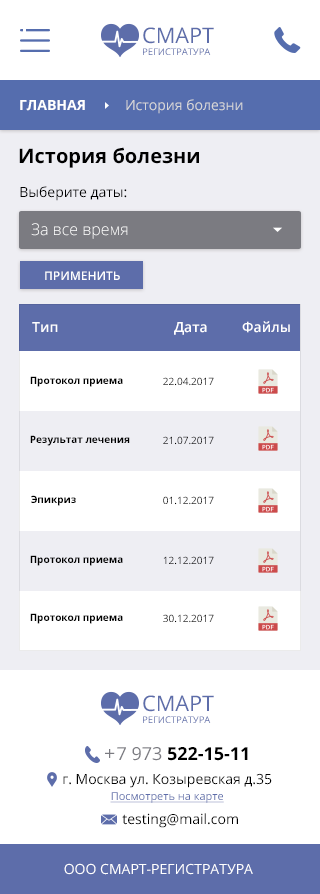
<style>
.page{position:relative;width:320px;height:894px;background:#ffffff}
.page>*{position:absolute;margin:0}
.t1{font:9.3px/11.5px "OpenSans";color:#5d6daa}
.t2{font:21.5px/11.5px "OpenSans";color:#5d6daa}
.t3{font:14px "OpenSans";color:#d8d8d8}
.t4{font:14px "OpenSans-Bold";color:#ffffff}
.t5{font:20px "OpenSans-Bold";color:#000000}
.t6{font:14px "OpenSans";color:#000000}
.t7{font:16px "OpenSans-Light";color:#ffffff}
.t8{font:12px "OpenSans-Semibold";color:#ffffff;text-transform:uppercase}
.t9{font:14px "OpenSans-Semibold";color:#ffffff}
.t10{font:10px "OpenSans-Bold";color:#000000}
.t11{font:10px "OpenSans";color:#000000}
.t12{font:18px "HelveticaNeue";color:#7b7b81}
.t13{font:18px "OpenSans-Bold";color:#000000}
.t14{font:18px "OpenSans";color:#000000}
.t15{font:18px "OpenSans";color:#7b7b81}
.t16{font:14px/14px "OpenSans";color:#000000}
.t17{font:11px/16px "OpenSans";color:#5d6daa;text-decoration:underline}
.t18{font:14px "OpenSans";color:#ffffff}
</style>
<div class="page">
<p class="t1" style="left:143px;top:27px;width:71px;height:28px"><span class="t2">CМАРТ<br></span>РЕГИСТРАТУРА</p>
<p class="t3" style="left:20px;top:99px;width:223px;height:15px"><span class="t4">ГЛАВНАЯ          </span>История болезни</p>
<p class="t5" style="left:19px;top:147px;width:180px;height:21px">История болезни</p>
<p class="t6" style="left:20px;top:186px;width:107px;height:15px">Выберите даты:</p>
<p class="t7" style="left:31px;top:223px;width:97px;height:16px">За все время</p>
<p class="t8" style="left:45px;top:271px;width:75px;height:9px">Применить</p>
<p class="t9" style="left:32px;top:322px;width:26px;height:10px">Тип</p>
<p class="t9" style="left:174px;top:322px;width:33px;height:13px">Дата</p>
<p class="t9" style="left:242px;top:321px;width:48px;height:12px">Файлы</p>
<p class="t10" style="left:30px;top:376px;width:93px;height:11px">Протокол приема</p>
<p class="t11" style="left:163px;top:377px;width:51px;height:9px">22.04.2017</p>
<p class="t10" style="left:30px;top:435px;width:100px;height:11px">Результат лечения</p>
<p class="t11" style="left:163px;top:436px;width:51px;height:9px">21.07.2017</p>
<p class="t10" style="left:31px;top:495px;width:45px;height:11px">Эпикриз</p>
<p class="t11" style="left:163px;top:496px;width:51px;height:9px">01.12.2017</p>
<p class="t10" style="left:30px;top:555px;width:93px;height:11px">Протокол приема</p>
<p class="t11" style="left:163px;top:556px;width:51px;height:9px">12.12.2017</p>
<p class="t10" style="left:30px;top:613px;width:93px;height:11px">Протокол приема</p>
<p class="t11" style="left:163px;top:614px;width:51px;height:9px">30.12.2017</p>
<p class="t1" style="left:143px;top:695px;width:71px;height:28px"><span class="t2">CМАРТ<br></span>РЕГИСТРАТУРА</p>
<p class="t12" style="left:105px;top:749px;width:10px;height:9px">+</p>
<p class="t13" style="left:117px;top:747px;width:131px;height:14px"><span class="t14">  </span><span class="t15">7 973 </span>522-15-11</p>
<p class="t16" style="left:63px;top:773px;width:209px;height:30px;text-align:center">г. Москва ул. Козыревская д.35<br><span class="t17">Посмотреть на карте</span></p>
<p class="t6" style="left:122px;top:813px;width:116px;height:15px">testing@mail.com</p>
<p class="t18" style="left:64px;top:863px;width:189px;height:12px">ООО СМАРТ-РЕГИСТРАТУРА</p>
</div>
